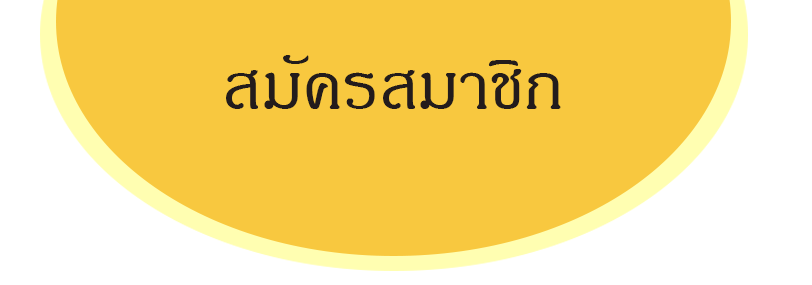
<style>
.page{position:relative;width:812px;height:285px;background:#f8c83f}
.page>*{position:absolute;margin:0}
.t1{font:89.8px "JasmineUPC";color:#231c1c}
</style>
<div class="page">
<p class="t1" style="left:226px;top:55px;width:335px;height:54px">สมัครสมาชิก</p>
</div>
